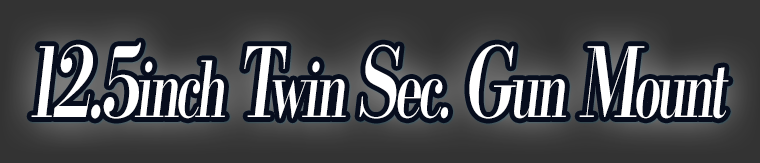
<style>
.page{position:relative;width:760px;height:163px}
.page>*{position:absolute;margin:0}
.t1{font:96px "KochoStd-Heavy";letter-spacing:-0.08em;color:#ffffff;font-style:italic;scale:0.65 1}
.t2{font:76.8px "KochoStd-Heavy";letter-spacing:-0.08em;color:#ffffff;font-style:italic;scale:0.65 1}
</style>
<div class="page">
<p class="t1" style="left:31px;top:42px;width:698px;height:77px">12.5<span class="t2">inch</span> T<span class="t2">win </span>S<span class="t2">ec.</span> G<span class="t2">un</span> M<span class="t2">ount</span></p>
</div>
